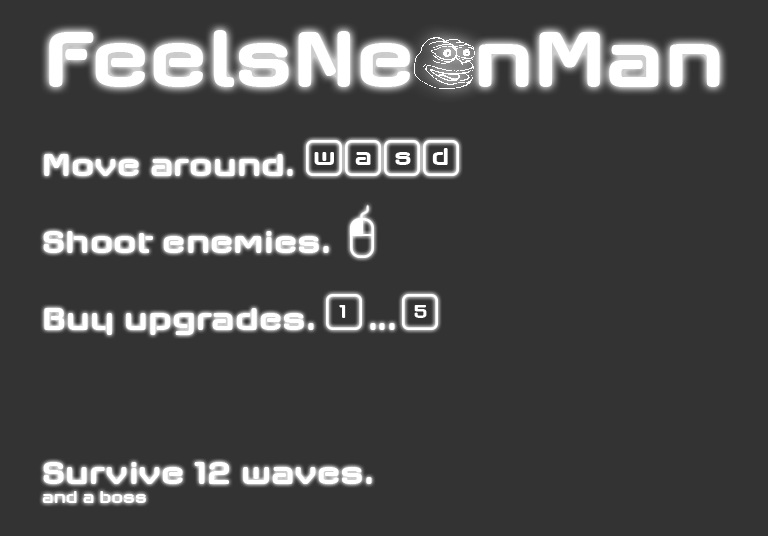
<style>
.page{position:relative;width:768px;height:536px;background:#333333}
.page>*{position:absolute;margin:0}
.t1{font:32px "AxaxaxRg-Bold";color:#ffffff}
.t2{font:16px "AxaxaxRg-Bold";color:#ffffff}
</style>
<div class="page">
<p class="t1" style="left:42px;top:154px;width:330px;height:349px">Move around.<br><br>Shoot enemies.<br><br>Buy upgrades.<br><br><br><br>Survive 12 waves.<br><span class="t2">and a boss</span></p>
</div>
